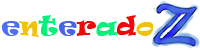
<style>
.page{position:relative;width:200px;height:50px;background:#ffffff}
.page>*{position:absolute;margin:0}
.t1{font:25px "Ravie";color:#4e6ff1}
.t2{font:25px "Ravie";color:#f0c208}
.t3{font:25px "Ravie";color:#08f07b}
.t4{font:25px "Ravie";color:#4764e5}
.t5{font:25px "Ravie";color:#f00808}
</style>
<div class="page">
<p class="t1" style="left:1px;top:15px;width:153px;height:22px">e<span class="t2">n</span><span class="t3">t</span><span class="t4">e</span><span class="t5">r</span><span class="t3">a</span><span class="t5">d</span><span class="t2">o</span></p>
</div>
